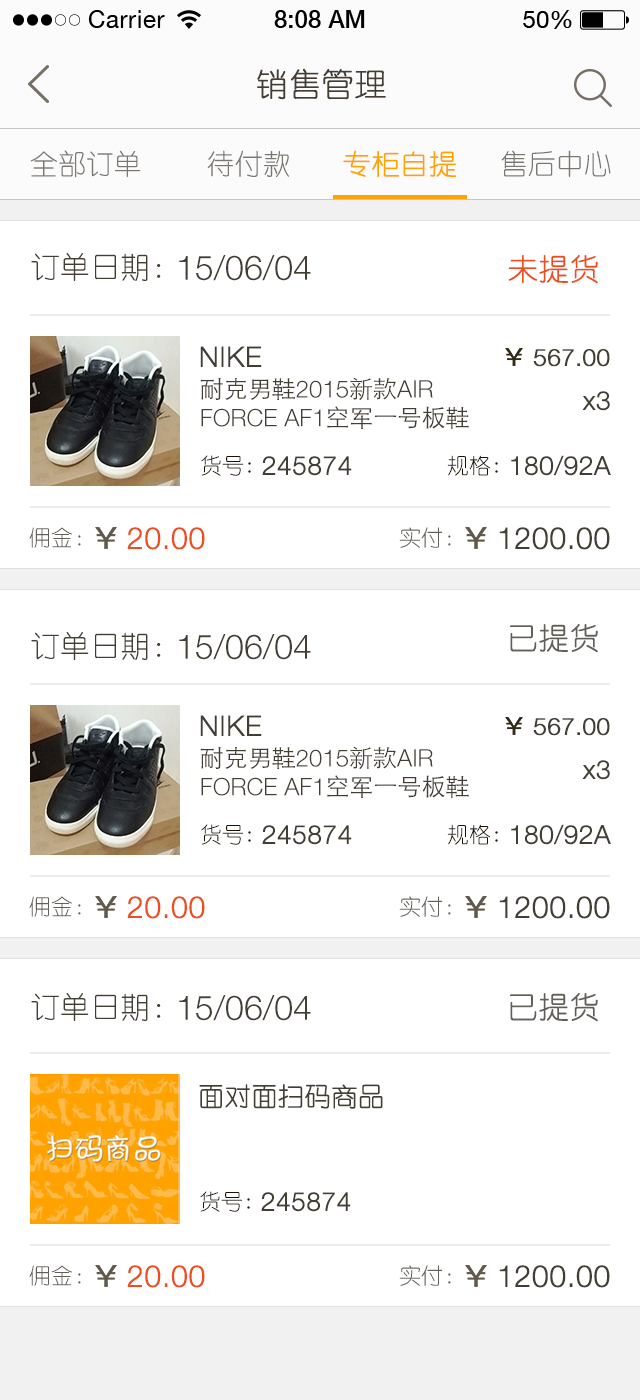
<style>
.page{position:relative;width:640px;height:1400px;background:#ffffff}
.page>*{position:absolute;margin:0}
.t1{font:32px "YouYuan";color:#433d33;text-transform:uppercase;font-weight:bold}
.t2{font:28px "YouYuan";color:#7a7772;text-transform:uppercase}
.t3{font:28px "YouYuan";color:#ffa300;text-transform:uppercase;font-weight:bold}
.t4{font:30px "YouYuan";color:#433e34;text-transform:uppercase}
.t5{font:34px "HelveticaNeueLTPro-Lt";color:#433e34;text-transform:uppercase}
.t6{font:30px "YouYuan";color:#ed4e1f;text-transform:uppercase;font-weight:bold}
.t7{font:28px "HelveticaNeueLTPro-Lt";color:#433e34;text-transform:uppercase;font-weight:bold}
.t8{font:24px "HelveticaNeueLTPro-Lt";color:#433e34;text-transform:uppercase;font-weight:bold}
.t9{font:24px "HelveticaNeueLTPro-Lt";color:#433e34;text-transform:uppercase}
.t10{font:24px "STHeitiSC-Light";color:#433e34;text-transform:uppercase}
.t11{font:26px "HelveticaNeueLTPro-Lt";color:#433e34;font-weight:bold}
.t12{font:22px "YouYuan";color:#1b1100;text-transform:uppercase}
.t13{font:26px "HelveticaNeueLTPro-Lt";color:#433e34;text-transform:uppercase;font-weight:bold}
.t14{font:22px "YouYuan";color:#625e58;text-transform:uppercase}
.t15{font:30px "HelveticaNeueLTPro-Lt";color:#ed4e1f;text-transform:uppercase;font-weight:bold}
.t16{font:30px "HelveticaNeueLTPro-Lt";color:#433e34;text-transform:uppercase;font-weight:bold}
.t17{font:30px "YouYuan";color:#625e58;text-transform:uppercase;font-weight:bold}
.t18{font:26px "YouYuan";color:#433e34;text-transform:uppercase;font-weight:bold}
</style>
<div class="page">
<p class="t1" style="left:257px;top:68px;width:129px;height:32px">销售管理</p>
<p class="t2" style="left:30px;top:150px;width:111px;height:28px">全部订单</p>
<p class="t2" style="left:207px;top:150px;width:82px;height:27px">待付款</p>
<p class="t3" style="left:343px;top:150px;width:114px;height:28px">专柜自提</p>
<p class="t2" style="left:501px;top:150px;width:110px;height:27px">售后中心</p>
<p class="t4" style="left:31px;top:253px;width:130px;height:28px">订单日期：</p>
<p class="t5" style="left:179px;top:255px;width:132px;height:26px">15/06/04</p>
<p class="t6" style="left:508px;top:255px;width:90px;height:29px">未提货</p>
<p class="t7" style="left:200px;top:346px;width:62px;height:21px">NIKE</p>
<p class="t8" style="left:533px;top:349px;width:77px;height:18px">567.00</p>
<p class="t9" style="left:200px;top:377px;width:269px;height:52px"><span class="t10">耐克男鞋</span>2015<span class="t10">新款</span>air force AF1<span class="t10">空军一号板鞋</span></p>
<p class="t11" style="left:582px;top:391px;width:28px;height:20px">x3</p>
<p class="t12" style="left:201px;top:455px;width:50px;height:21px">货号:</p>
<p class="t13" style="left:262px;top:456px;width:90px;height:20px">245874</p>
<p class="t12" style="left:447px;top:455px;width:51px;height:21px">规格:</p>
<p class="t13" style="left:511px;top:455px;width:100px;height:21px">180/92a</p>
<p class="t14" style="left:29px;top:527px;width:52px;height:21px">佣金：</p>
<p class="t15" style="left:127px;top:527px;width:78px;height:23px">20.00</p>
<p class="t14" style="left:399px;top:527px;width:52px;height:21px">实付：</p>
<p class="t16" style="left:499px;top:527px;width:111px;height:23px">1200.00</p>
<p class="t17" style="left:510px;top:624px;width:88px;height:29px">已提货</p>
<p class="t4" style="left:31px;top:632px;width:130px;height:28px">订单日期：</p>
<p class="t5" style="left:179px;top:634px;width:132px;height:26px">15/06/04</p>
<p class="t7" style="left:200px;top:715px;width:62px;height:21px">NIKE</p>
<p class="t8" style="left:533px;top:718px;width:77px;height:18px">567.00</p>
<p class="t9" style="left:200px;top:746px;width:269px;height:52px"><span class="t10">耐克男鞋</span>2015<span class="t10">新款</span>air force AF1<span class="t10">空军一号板鞋</span></p>
<p class="t11" style="left:582px;top:760px;width:28px;height:20px">x3</p>
<p class="t12" style="left:201px;top:824px;width:50px;height:21px">货号:</p>
<p class="t13" style="left:262px;top:825px;width:90px;height:20px">245874</p>
<p class="t12" style="left:447px;top:824px;width:51px;height:21px">规格:</p>
<p class="t13" style="left:511px;top:824px;width:100px;height:21px">180/92a</p>
<p class="t14" style="left:29px;top:896px;width:52px;height:21px">佣金：</p>
<p class="t15" style="left:127px;top:896px;width:78px;height:23px">20.00</p>
<p class="t14" style="left:399px;top:896px;width:52px;height:21px">实付：</p>
<p class="t16" style="left:499px;top:896px;width:111px;height:23px">1200.00</p>
<p class="t4" style="left:31px;top:993px;width:130px;height:28px">订单日期：</p>
<p class="t5" style="left:179px;top:995px;width:132px;height:26px">15/06/04</p>
<p class="t17" style="left:510px;top:993px;width:88px;height:29px">已提货</p>
<p class="t18" style="left:199px;top:1084px;width:184px;height:25px">面对面扫码商品</p>
<p class="t12" style="left:200px;top:1191px;width:50px;height:21px">货号:</p>
<p class="t13" style="left:261px;top:1192px;width:90px;height:20px">245874</p>
<p class="t14" style="left:29px;top:1265px;width:52px;height:21px">佣金：</p>
<p class="t15" style="left:127px;top:1265px;width:78px;height:23px">20.00</p>
<p class="t14" style="left:399px;top:1265px;width:52px;height:21px">实付：</p>
<p class="t16" style="left:499px;top:1265px;width:111px;height:23px">1200.00</p>
</div>
